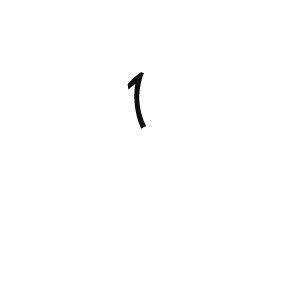
<style>
.page{position:relative;width:300px;height:300px;background:#ffffff}
.page>*{position:absolute;margin:0}
.t1{font:60px "Candara-Italic";color:#101010}
</style>
<div class="page">
<p class="t1" style="left:127px;top:72px;width:19px;height:57px">1</p>
</div>
